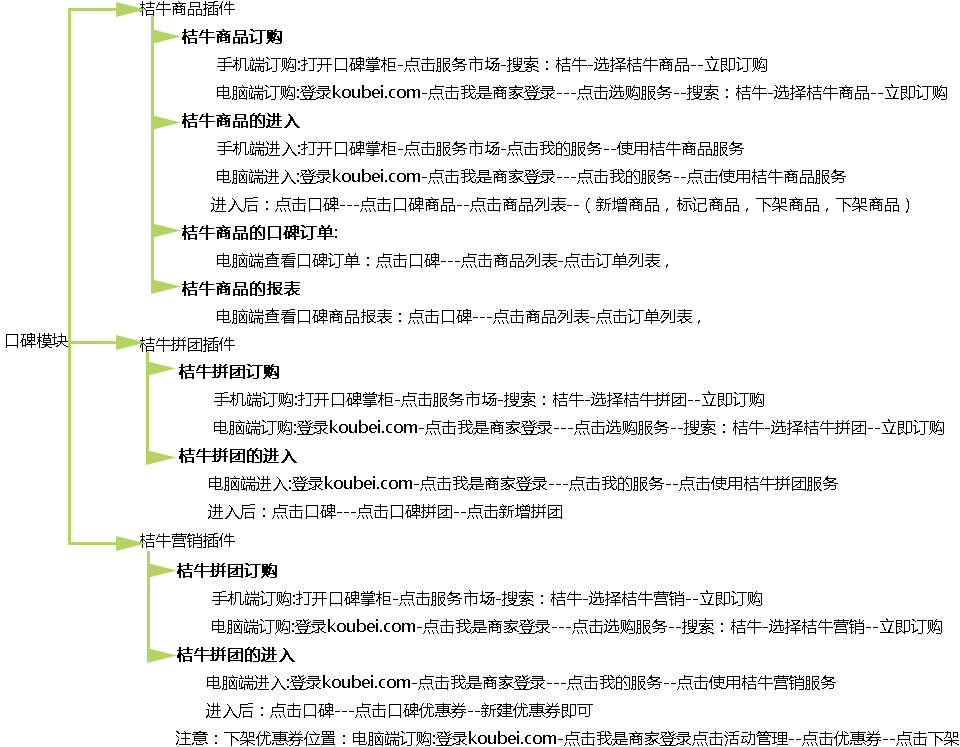
<style>
.page{position:relative;width:960px;height:747px;background:#ffffff}
.page>*{position:absolute;margin:0}
.t1{font:16px "MicrosoftYaHei";color:#000000}
.t2{font:16px "MicrosoftYaHei";color:#000000;font-weight:bold}
</style>
<div class="page">
<p class="t1" style="left:140px;top:1px;width:95px;height:547px">桔牛商品插件<br><br><br><br><br><br><br><br><br><br><br><br>桔牛拼团插件<br><br><br><br><br><br><br>桔牛营销插件</p>
<p class="t1" style="left:182px;top:29px;width:765px;height:295px"><span class="t2">桔牛商品订购<br></span> 手机端订购:打开口碑掌柜-点击服务市场-搜索：桔牛-选择桔牛商品--立即订购<br>       电脑端订购:登录koubei.com-点击我是商家登录---点击选购服务--搜索：桔牛-选择桔牛商品--立即订购<br><span class="t2">桔牛商品的进入<br></span> 手机端进入:打开口碑掌柜-点击服务市场-点击我的服务--使用桔牛商品服务<br>       电脑端进入:登录koubei.com-点击我是商家登录---点击我的服务--点击使用桔牛商品服务<br>      进入后：点击口碑---点击口碑商品--点击商品列表--（新增商品，标记商品，下架商品，下架商品）<br><span class="t2">桔牛商品的口碑订单</span>:<br>       电脑端查看口碑订单：点击口碑---点击商品列表-点击订单列表，<br><span class="t2">桔牛商品的报表</span> <br>       电脑端查看口碑商品报表：点击口碑---点击商品列表-点击订单列表，</p>
<p class="t1" style="left:6px;top:333px;width:62px;height:15px">口碑模块</p>
<p class="t1" style="left:179px;top:364px;width:765px;height:155px"><span class="t2">桔牛拼团订购<br></span> 手机端订购:打开口碑掌柜-点击服务市场-搜索：桔牛-选择桔牛拼团--立即订购<br>       电脑端订购:登录koubei.com-点击我是商家登录---点击选购服务--搜索：桔牛-选择桔牛拼团--立即订购<br><span class="t2">桔牛拼团的进入<br></span>      电脑端进入:登录koubei.com-点击我是商家登录---点击我的服务--点击使用桔牛拼团服务<br>      进入后：点击口碑---点击口碑拼团--点击新增拼团</p>
<p class="t1" style="left:176px;top:563px;width:783px;height:183px"><span class="t2">桔牛拼团订购<br></span> 手机端订购:打开口碑掌柜-点击服务市场-搜索：桔牛-选择桔牛营销--立即订购<br>       电脑端订购:登录koubei.com-点击我是商家登录---点击选购服务--搜索：桔牛-选择桔牛营销--立即订购<br><span class="t2">桔牛拼团的进入<br></span>      电脑端进入:登录koubei.com-点击我是商家登录---点击我的服务--点击使用桔牛营销服务<br>      进入后：点击口碑---点击口碑优惠券--新建优惠券即可<br>注意：下架优惠券位置：电脑端订购:登录koubei.com-点击我是商家登录点击活动管理--点击优惠券--点击下架</p>
</div>
